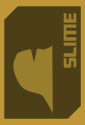
<style>
.page{position:relative;width:85px;height:125px;background:#4c3f17}
.page>*{position:absolute;margin:0}
.t1{font:20px "TransformersMovie";letter-spacing:0.06em;color:#997e2e}
.t2{font:20px "TransformersMovie";letter-spacing:0.04em;color:#997e2e}
.t3{font:20px "TransformersMovie";letter-spacing:0.02em;color:#997e2e}
</style>
<div class="page">
<p class="t1" style="left:63px;top:12px;width:14px;height:56px;rotate:-90deg"><span class="t2">s</span><span class="t3">l</span>im<span class="t2">e</span></p>
</div>
